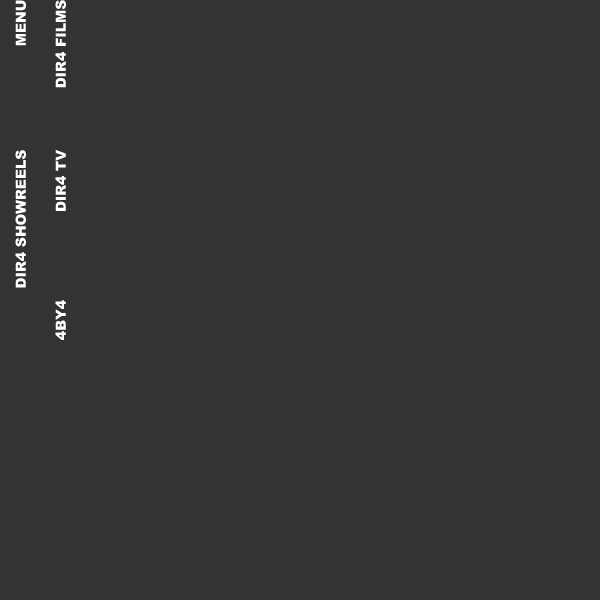
<style>
.page{position:relative;width:600px;height:600px;background:#333333}
.page>*{position:absolute;margin:0}
.t1{font:14px "Arial-Black";color:#ffffff}
</style>
<div class="page">
<p class="t1" style="left:15px;top:0px;width:11px;height:46px;rotate:-90deg">MENU</p>
<p class="t1" style="left:55px;top:0px;width:11px;height:88px;rotate:-90deg">DIR4 FILMS</p>
<p class="t1" style="left:15px;top:150px;width:11px;height:138px;rotate:-90deg">DIR4 SHOWREELS</p>
<p class="t1" style="left:55px;top:150px;width:11px;height:61px;rotate:-90deg">DIR4 TV</p>
<p class="t1" style="left:55px;top:300px;width:11px;height:40px;rotate:-90deg">4BY4</p>
</div>
